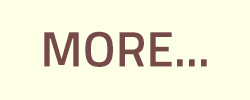
<style>
.page{position:relative;width:250px;height:100px;background:#fdfee6}
.page>*{position:absolute;margin:0}
.t1{font:50px "Titillium-Semibold";color:#774a4a}
</style>
<div class="page">
<p class="t1" style="left:44px;top:31px;width:163px;height:36px">MORE...</p>
</div>
